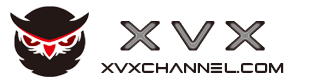
<style>
.page{position:relative;width:320px;height:80px;background:#ffffff}
.page>*{position:absolute;margin:0}
.t1{font:14px "rigelstar-Regular";color:#231816}
</style>
<div class="page">
<p class="t1" style="left:101px;top:63px;width:183px;height:10px">xvxchannel.com</p>
</div>
